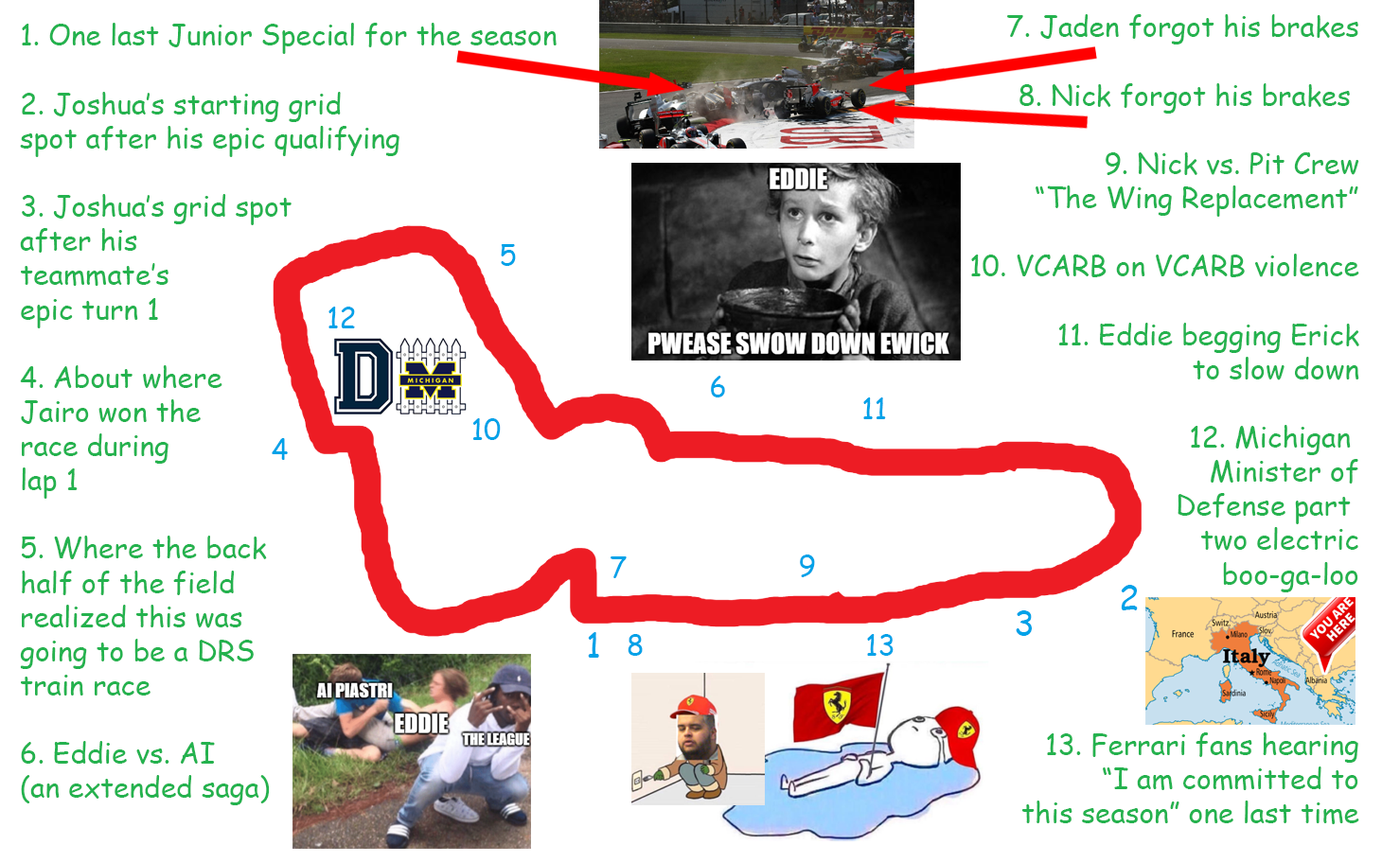
<style>
.page{position:relative;width:1382px;height:863px;background:#ffffff}
.page>*{position:absolute;margin:0}
.t1{font:28.5px "ComicSansMS";color:#24b24e}
.t2{font:28.4px "ComicSansMS";color:#00a2e8}
.t3{font:28.6px "ComicSansMS";color:#00a2e8}
.t4{font:34.1px "ComicSansMS";color:#00a2e8}
.t5{font:34.2px "ComicSansMS";color:#00a2e8}
</style>
<div class="page">
<p class="t1" style="left:971px;top:14px;width:388px;height:810px;text-align:right">7. Jaden forgot his brakes<br><br>8. Nick forgot his brakes <br><br>9. Nick vs. Pit Crew<br>“The Wing Replacement”<br><br>10. VCARB on VCARB violence<br><br>11. Eddie begging Erick<br>to slow down<br><br>12. Michigan <br>Minister of<br>Defense part <br>two electric<br>boo-ga-loo<br><br><br><br><br>13. Ferrari fans hearing<br>“I am committed to<br>this season” one last time</p>
<p class="t1" style="left:20px;top:23px;width:536px;height:782px">1. One last Junior Special for the season<br><br>2. Joshua’s starting grid<br>spot after his epic qualifying<br><br>3. Joshua’s grid spot<br>after his<br>teammate’s<br>epic turn 1<br><br>4. About where<br>Jairo won the<br>race during<br>lap 1<br><br>5. Where the back<br>half of the field<br>realized this was<br>going to be a DRS<br>train race<br><br>6. Eddie vs. AI<br>(an extended saga)</p>
<p class="t2" style="left:501px;top:244px;width:15px;height:22px">5</p>
<p class="t3" style="left:328px;top:307px;width:27px;height:21px">12</p>
<p class="t2" style="left:711px;top:376px;width:14px;height:21px">6</p>
<p class="t2" style="left:863px;top:397px;width:23px;height:22px">11</p>
<p class="t2" style="left:472px;top:418px;width:29px;height:22px">10</p>
<p class="t2" style="left:272px;top:438px;width:16px;height:22px">4</p>
<p class="t2" style="left:610px;top:556px;width:16px;height:22px">7</p>
<p class="t2" style="left:800px;top:555px;width:15px;height:22px">9</p>
<p class="t4" style="left:1120px;top:585px;width:17px;height:25px">2</p>
<p class="t4" style="left:1015px;top:610px;width:17px;height:26px">3</p>
<p class="t5" style="left:588px;top:632px;width:11px;height:26px">1</p>
<p class="t2" style="left:627px;top:634px;width:16px;height:22px">8</p>
<p class="t2" style="left:867px;top:634px;width:26px;height:22px">13</p>
</div>
